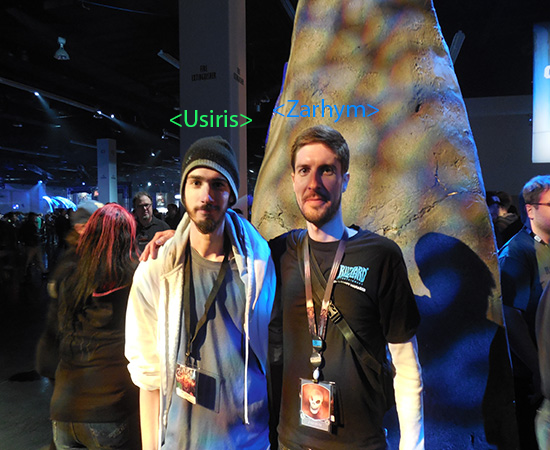
<style>
.page{position:relative;width:550px;height:450px}
.page>*{position:absolute;margin:0}
.t1{font:25px "MyriadPro-Regular";color:#008aff}
.t2{font:25px "MyriadPro-Regular";color:#21f266}
</style>
<div class="page">
<p class="t1" style="left:273px;top:99px;width:106px;height:24px">&lt;Zarhym&gt;</p>
<p class="t2" style="left:170px;top:110px;width:82px;height:17px">&lt;Usiris&gt;</p>
</div>
